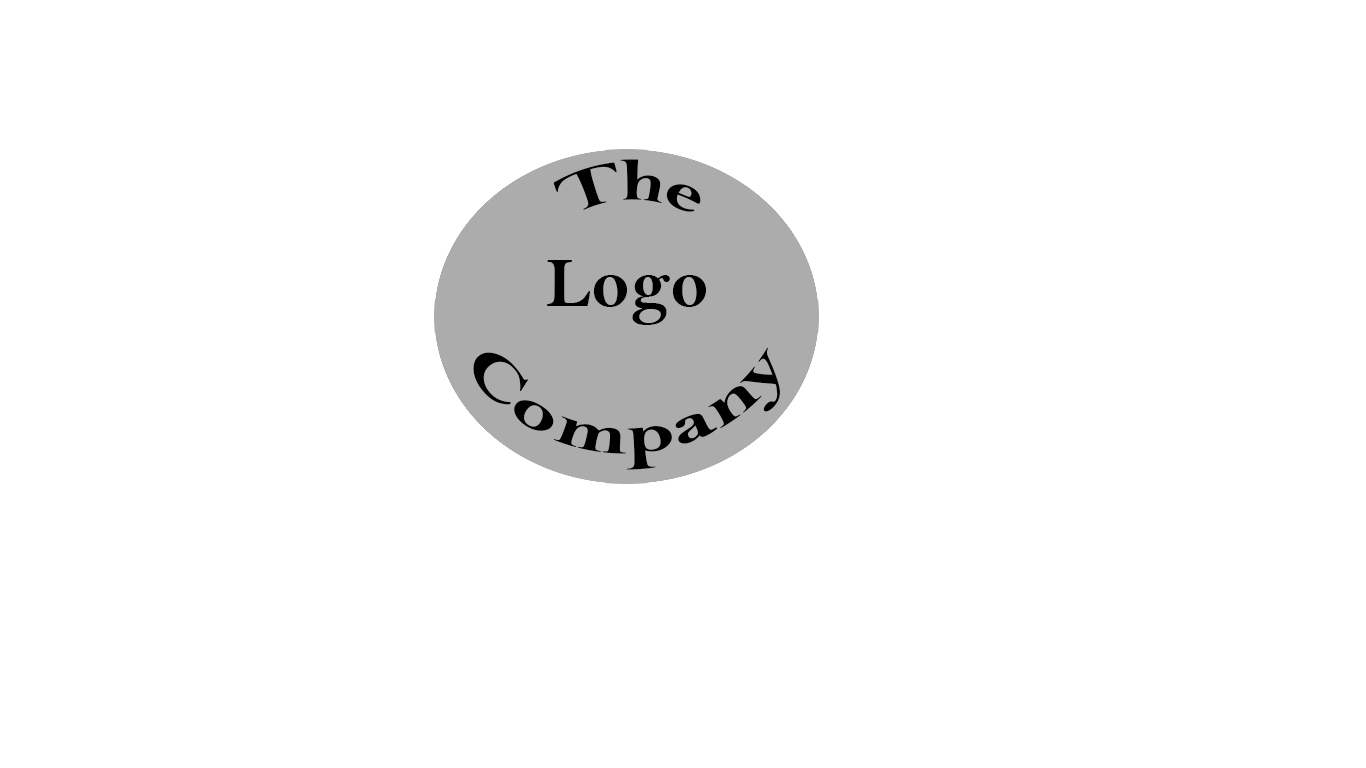
<style>
.page{position:relative;width:1366px;height:768px;background:#ffffff}
.page>*{position:absolute;margin:0}
.t1{font:60px "BellMTBold";color:#000000}
.t2{font:72px "BellMTBold";color:#000000}
</style>
<div class="page">
<p class="t1" style="left:553px;top:159px;width:148px;height:53px">The</p>
<p class="t2" style="left:546px;top:260px;width:160px;height:65px">Logo</p>
<p class="t1" style="left:473px;top:347px;width:307px;height:123px">Company</p>
</div>
